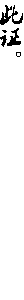
<style>
.page{position:relative;width:24px;height:300px;background:#ffffff}
.page>*{position:absolute;margin:0}
.t1{font:24px "Ò¶¸ùÓÑÃ«±ÊÐÐÊé";color:#000000}
</style>
<div class="page">
<p class="t1" style="left:0px;top:5px;width:23px;height:52px">此证。</p>
</div>
